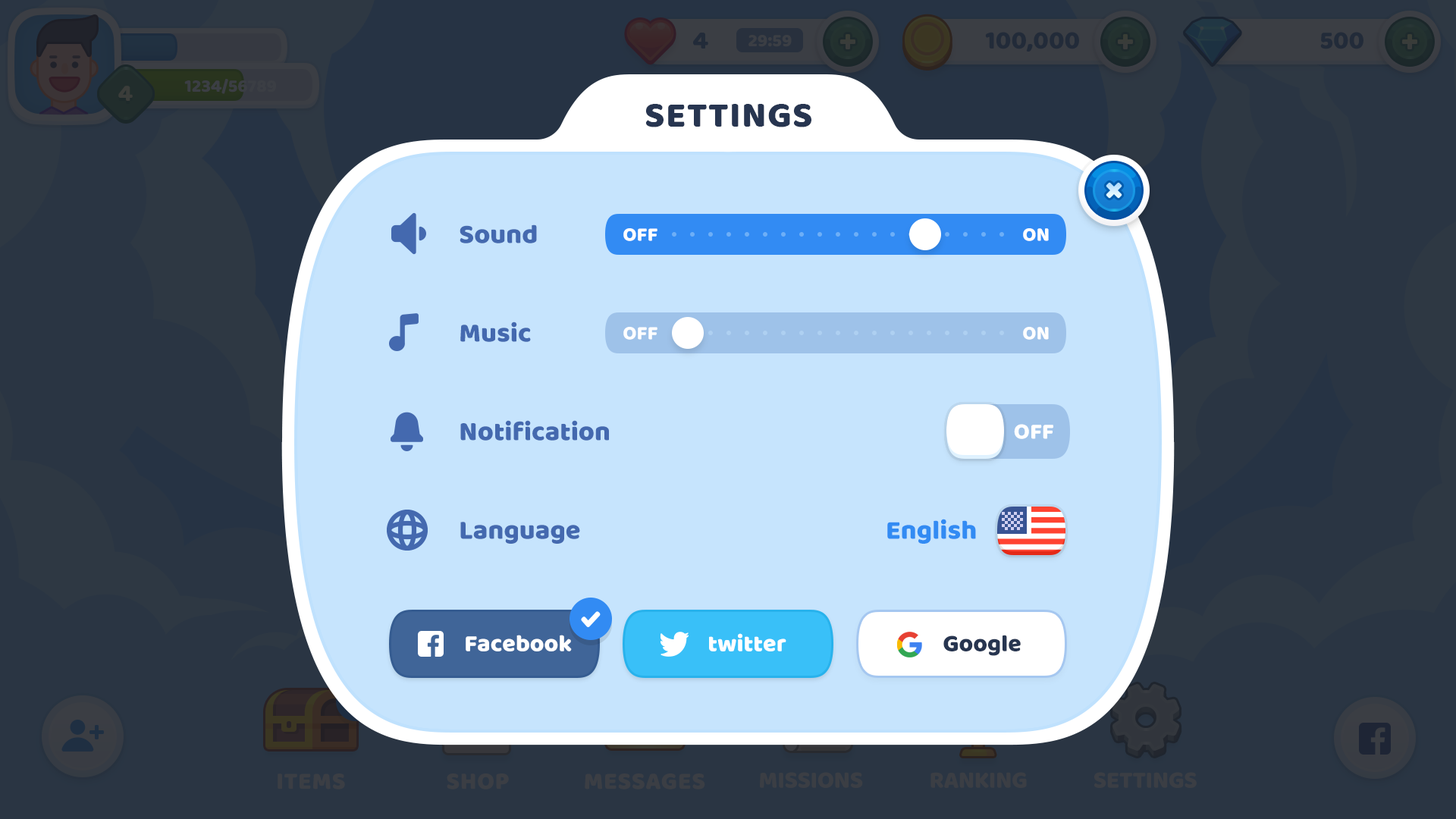
<style>
.page{position:relative;width:1456px;height:819px;background:#c6e4fd}
.page>*{position:absolute;margin:0}
.t1{font:36.4px "BalooBhaijaan-Regular";color:#273550;text-transform:uppercase}
.t2{font:27.3px "BalooBhaijaan-Regular";color:#4469af}
.t3{font:19.7px "BalooBhaijaan-Regular";color:#ffffff;text-transform:uppercase}
.t4{font:22.7px "BalooBhaijaan-Regular";color:#ffffff;text-transform:uppercase}
.t5{font:27.3px "BalooBhaijaan-Regular";color:#328bf3}
.t6{font:24.3px "BalooBhaijaan-Regular";color:#ffffff}
.t7{font:24.3px "BalooBhaijaan-Regular";color:#273550}
</style>
<div class="page">
<p class="t1" style="left:645px;top:104px;width:166px;height:23px">Settings</p>
<p class="t2" style="left:460px;top:224px;width:77px;height:19px">Sound</p>
<p class="t3" style="left:623px;top:228px;width:34px;height:13px">off</p>
<p class="t3" style="left:1023px;top:228px;width:26px;height:13px">on</p>
<p class="t2" style="left:460px;top:322px;width:71px;height:20px">Music</p>
<p class="t3" style="left:623px;top:327px;width:34px;height:13px">off</p>
<p class="t3" style="left:1023px;top:327px;width:26px;height:13px">on</p>
<p class="t2" style="left:460px;top:420px;width:149px;height:21px">Notification</p>
<p class="t4" style="left:1014px;top:424px;width:39px;height:15px">off</p>
<p class="t2" style="left:460px;top:522px;width:120px;height:22px">Language</p>
<p class="t5" style="left:887px;top:519px;width:89px;height:25px">English</p>
<p class="t6" style="left:466px;top:635px;width:106px;height:16px">Facebook</p>
<p class="t6" style="left:709px;top:633px;width:77px;height:18px">twitter</p>
<p class="t7" style="left:943px;top:635px;width:78px;height:21px">Google</p>
</div>
